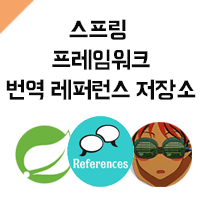
<style>
.page{position:relative;width:200px;height:200px;background:#ffffff}
.page>*{position:absolute;margin:0}
.t1{font:24px/30px "BMHANNA";color:#0b0a0a}
</style>
<div class="page">
<p class="t1" style="left:6px;top:19px;width:190px;height:81px;text-align:center">스프링 <br>프레임워크<br>번역 레퍼런스 저장소</p>
</div>
